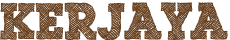
<style>
.page{position:relative;width:230px;height:40px;background:#ffffff}
.page>*{position:absolute;margin:0}
.t1{font:50px "ScribbleBoxDEMO";color:#684121}
</style>
<div class="page">
<p class="t1" style="left:0px;top:2px;width:228px;height:39px">Kerjaya</p>
</div>
